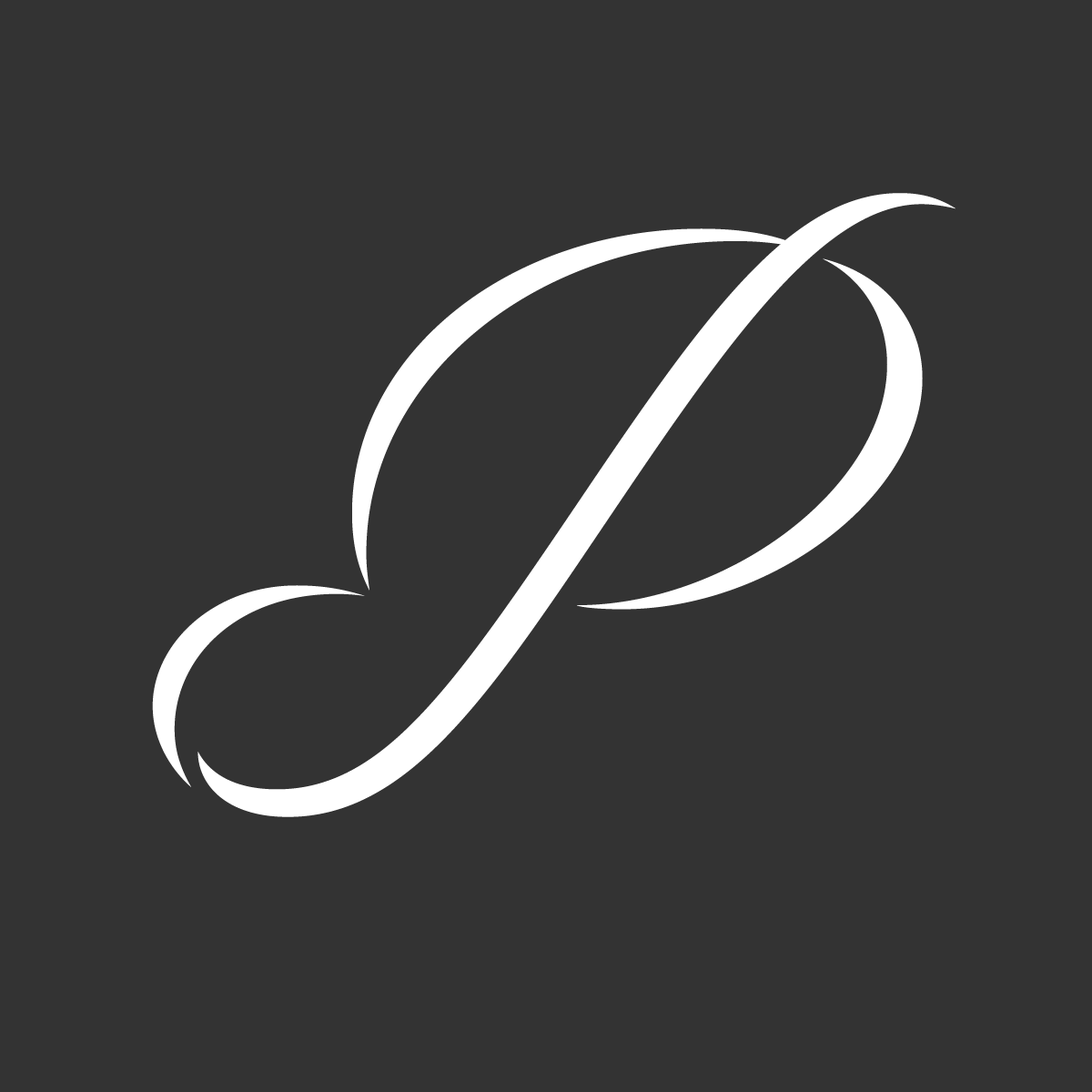
<style>
.page{position:relative;width:1092px;height:1092px;background:#333333}
.page>*{position:absolute;margin:0}
.t1{font:637px "Volina-Regular";color:#ffffff}
</style>
<div class="page">
<p class="t1" style="left:152px;top:193px;width:803px;height:624px">P</p>
</div>
